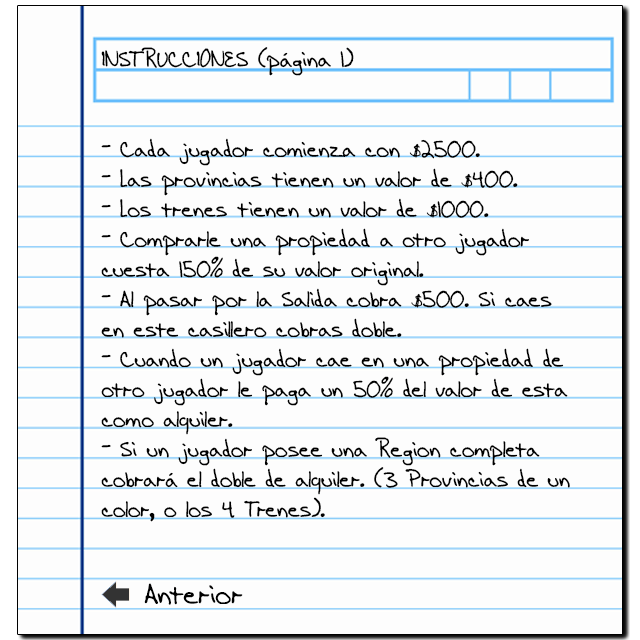
<style>
.page{position:relative;width:640px;height:640px;background:#fdfdfd}
.page>*{position:absolute;margin:0}
.t1{font:24px/30px "AEnigmaScrawl4BRK";color:#000000}
.t2{font:16px/30px "AEnigmaScrawl4BRK";color:#000000}
.t3{font:30px "AEnigmaScrawl4BRK";color:#000000}
</style>
<div class="page">
<p class="t1" style="left:101px;top:47px;width:469px;height:475px">INSTRUCCIONES (página 1)<br><br><br>- Cada jugador comienza con <span class="t2">$</span>2500.<br>- Las provincias tienen un valor de <span class="t2">$</span>400.<br>- Los trenes tienen un valor de <span class="t2">$</span>1000.<br>- Comprarle una propiedad a otro jugador<br>cuesta 150% de su valor original.<br>- Al pasar por la Salida cobra <span class="t2">$</span>500. Si caes<br>en este casillero cobras doble.<br>- Cuando un jugador cae en una propiedad de<br>otro jugador le paga un 50% del valor de esta<br>como alquiler.<br>- Si un jugador posee una Region completa <br>cobrará el doble de alquiler. (3 Provincias de un<br>color, o los 4 Trenes).</p>
<p class="t3" style="left:144px;top:583px;width:99px;height:22px">Anterior</p>
</div>
